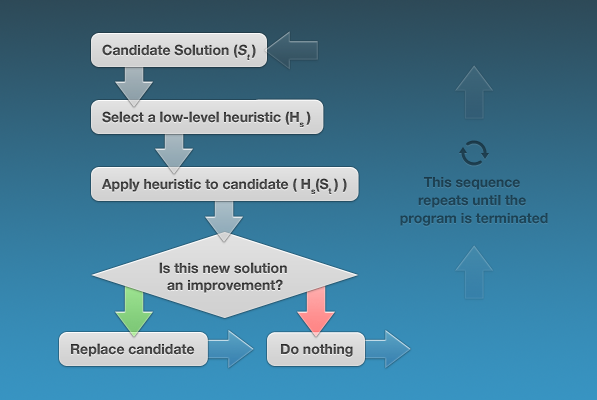
<style>
.page{position:relative;width:597px;height:400px}
.page>*{position:absolute;margin:0}
.t1{font:14px "HelveticaNeueBold";color:#444444}
.t2{font:14px "HelveticaNeueBold";color:#444444;font-style:italic}
.t3{font:14px "HelveticaNeueBold";color:#454545}
.t4{font:24px/18px "HelveticaNeueBold";color:#1d4254}
.t5{font:14px "HelveticaNeueBold";color:#434343}
.t6{font:14px "HelveticaNeueBold";color:#464646}
</style>
<div class="page">
<p class="t1" style="left:102px;top:44px;width:154px;height:16px">Candidate Solution (<span class="t2">St </span>)</p>
<p class="t3" style="left:102px;top:111px;width:209px;height:16px">Select a low-level heuristic (Hs )</p>
<p class="t3" style="left:102px;top:178px;width:245px;height:16px">Apply heuristic to candidate ( Hs(St )  )</p>
<p class="t4" style="left:400px;top:177px;width:148px;height:49px;text-align:center">This sequence <br>repeats until the <br>program is terminated</p>
<p class="t1" style="left:159px;top:262px;width:128px;height:31px;text-align:center">Is this new solution <br>an improvement?</p>
<p class="t5" style="left:71px;top:343px;width:124px;height:14px">Replace candidate</p>
<p class="t6" style="left:281px;top:344px;width:72px;height:13px">Do nothing</p>
</div>
